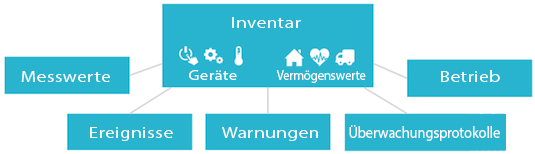
<style>
.page{position:relative;width:535px;height:154px;background:#ffffff}
.page>*{position:absolute;margin:0}
.t1{font:16px "MyriadPro-Regular";letter-spacing:0.025em;color:#fefdfd;scale:1.2 1}
.t2{font:14px "MyriadPro-Regular";letter-spacing:0.025em;color:#fefdfd;scale:1.2 1}
.t3{font:14px "MyriadPro-Regular";letter-spacing:-0.005em;color:#fefdfd;scale:0.9 1}
.t4{font:16px "MyriadPro-Regular";letter-spacing:-0.005em;color:#fefdfd;scale:0.9 1}
</style>
<div class="page">
<p class="t1" style="left:21px;top:71px;width:89px;height:11px">Messwerte</p>
<p class="t2" style="left:189px;top:70px;width:48px;height:10px">Geräte</p>
<p class="t3" style="left:276px;top:70px;width:90px;height:13px">Vermögenswerte</p>
<p class="t1" style="left:441px;top:70px;width:59px;height:12px">Betrieb</p>
<p class="t4" style="left:349px;top:125px;width:151px;height:16px">Überwachungsprotokolle</p>
<p class="t1" style="left:90px;top:127px;width:83px;height:14px">Ereignisse</p>
<p class="t1" style="left:222px;top:127px;width:96px;height:14px">Warnungen</p>
</div>
